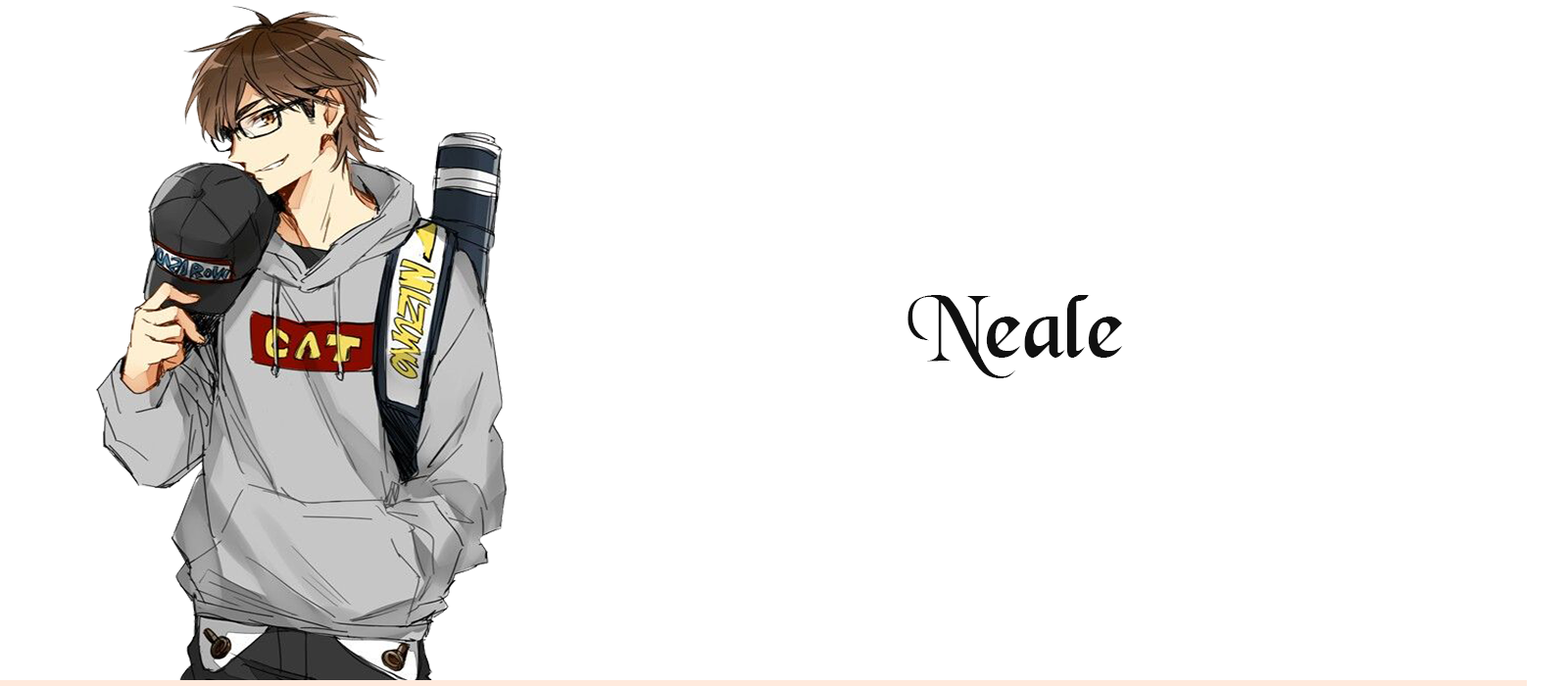
<style>
.page{position:relative;width:1568px;height:686px;background:#ffffff}
.page>*{position:absolute;margin:0}
.t1{font:93.1px "BlackChancery";color:#101010}
</style>
<div class="page">
<p class="t1" style="left:907px;top:295px;width:215px;height:83px">Neale</p>
</div>
